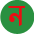
<style>
.page{position:relative;width:34px;height:34px;background:#2a9040}
.page>*{position:absolute;margin:0}
.t1{font:30px "BanglaSangamMN-Bold";color:#ea0e13}
</style>
<div class="page">
<p class="t1" style="left:8px;top:6px;width:17px;height:20px">ন</p>
</div>
